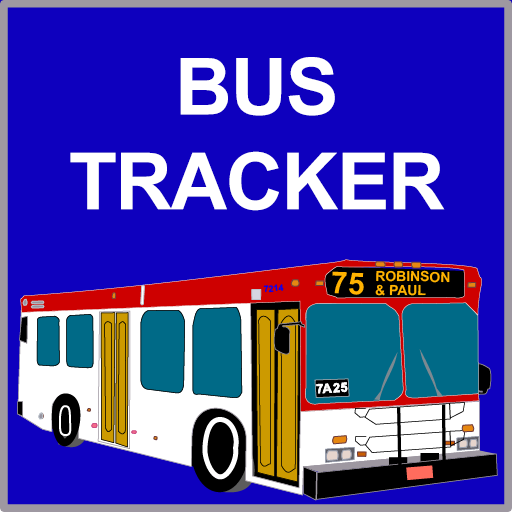
<style>
.page{position:relative;width:512px;height:512px;background:#0e00be}
.page>*{position:absolute;margin:0}
.t1{font:78.9px "Arial-BoldMT";letter-spacing:-0.02em;color:#ffffff}
</style>
<div class="page">
<p class="t1" style="left:70px;top:57px;width:375px;height:154px;text-align:center">BUS<br>TRACKER</p>
</div>
